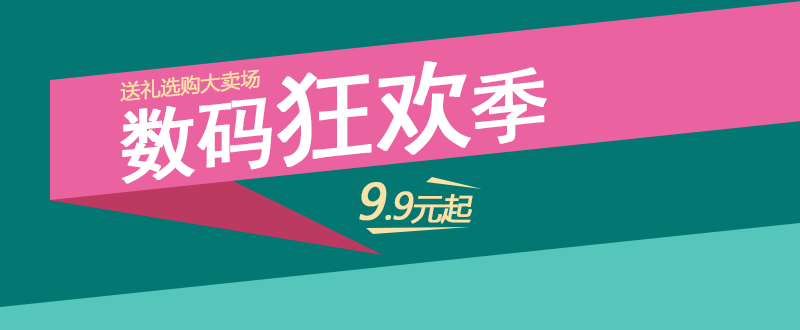
<style>
.page{position:relative;width:800px;height:330px;background:#ea62a0}
.page>*{position:absolute;margin:0}
.t1{font:80px "SimHei";letter-spacing:-0.05em;color:#ffffff;font-weight:bold}
.t2{font:100px "SimHei";letter-spacing:-0.05em;color:#ffffff;font-weight:bold}
.t3{font:20px "MicrosoftYaHei";letter-spacing:-0.05em;color:#f8e2a8;font-weight:bold}
.t4{font:36px "MicrosoftYaHei";letter-spacing:-0.05em;color:#f8e2a8;font-weight:bold;font-style:italic}
.t5{font:48px "MicrosoftYaHei";letter-spacing:-0.05em;color:#f8e2a8;font-weight:bold;font-style:italic}
.t6{font:30px "MicrosoftYaHei";letter-spacing:-0.05em;color:#f8e2a8;font-weight:bold;font-style:italic}
</style>
<div class="page">
<p class="t1" style="left:120px;top:61px;width:427px;height:123px;rotate:-6deg">数码<span class="t2">狂欢</span>季</p>
<p class="t3" style="left:120px;top:69px;width:140px;height:33px;rotate:-6deg">送礼选购大卖场</p>
<p class="t4" style="left:359px;top:182px;width:114px;height:42px"><span class="t5">9</span>.9<span class="t6">元起</span></p>
</div>
